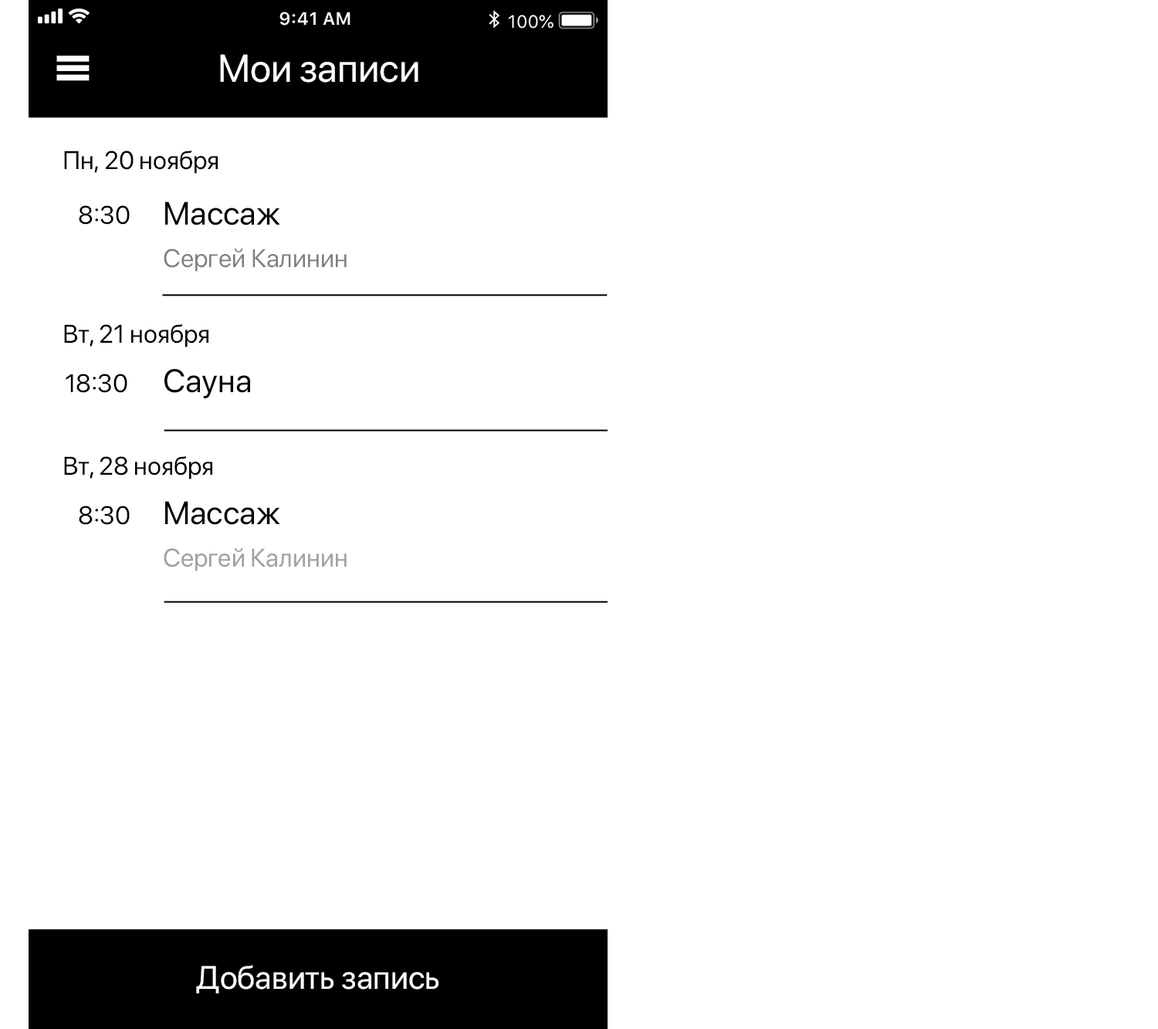
<style>
.page{position:relative;width:1158px;height:1029px;background:#ffffff}
.page>*{position:absolute;margin:0}
.t1{font:38.6px "SFProDisplay-Regular";color:#ffffff}
.t2{font:25.5px "SFProDisplay-Regular";color:#000000}
.t3{font:32.4px "SFProDisplay-Regular";color:#000000}
.t4{font:25.5px "SFProDisplay-Regular";color:#7f7f7f}
.t5{font:25.5px "SFProDisplay-Regular";color:#a1a1a1}
.t6{font:32.4px "SFProDisplay-Regular";color:#ffffff}
</style>
<div class="page">
<p class="t1" style="left:220px;top:54px;width:199px;height:29px">Мои записи</p>
<p class="t2" style="left:64px;top:151px;width:154px;height:23px">Пн, 20 ноября</p>
<p class="t2" style="left:79px;top:205px;width:51px;height:20px">8:30</p>
<p class="t3" style="left:165px;top:202px;width:115px;height:23px">Массаж</p>
<p class="t4" style="left:164px;top:249px;width:183px;height:23px">Сергей Калинин</p>
<p class="t2" style="left:64px;top:324px;width:145px;height:24px">Вт, 21 ноября</p>
<p class="t2" style="left:66px;top:374px;width:61px;height:19px">18:30</p>
<p class="t3" style="left:164px;top:369px;width:86px;height:29px">Сауна</p>
<p class="t2" style="left:64px;top:456px;width:148px;height:24px">Вт, 28 ноября</p>
<p class="t2" style="left:79px;top:506px;width:51px;height:19px">8:30</p>
<p class="t3" style="left:165px;top:501px;width:115px;height:24px">Массаж</p>
<p class="t5" style="left:164px;top:548px;width:183px;height:23px">Сергей Калинин</p>
<p class="t6" style="left:196px;top:965px;width:243px;height:29px">Добавить запись</p>
</div>
